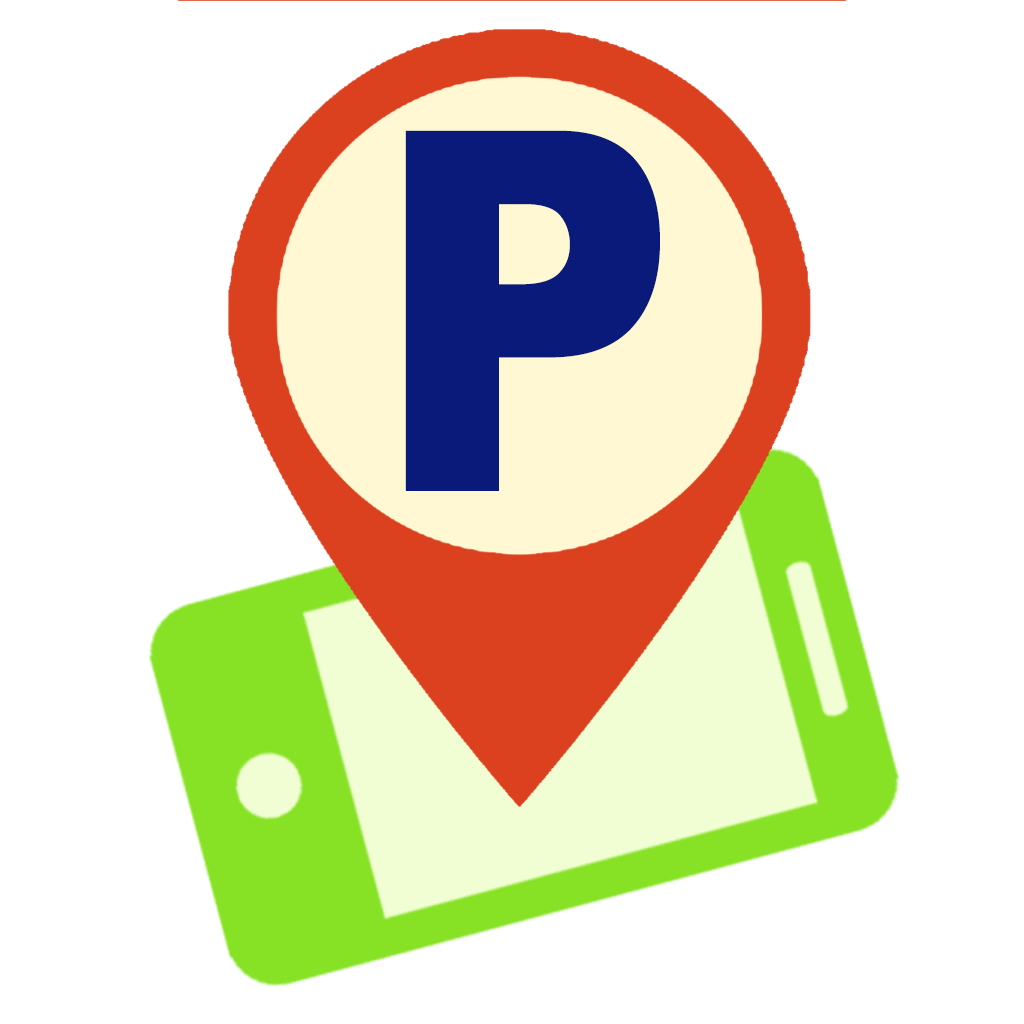
<style>
.page{position:relative;width:1024px;height:1024px;background:#ffffff}
.page>*{position:absolute;margin:0}
.t1{font:502.8px "Arial-Black";color:#091a7a;scale:0.83 1}
</style>
<div class="page">
<p class="t1" style="left:405px;top:130px;width:255px;height:361px">P</p>
</div>
